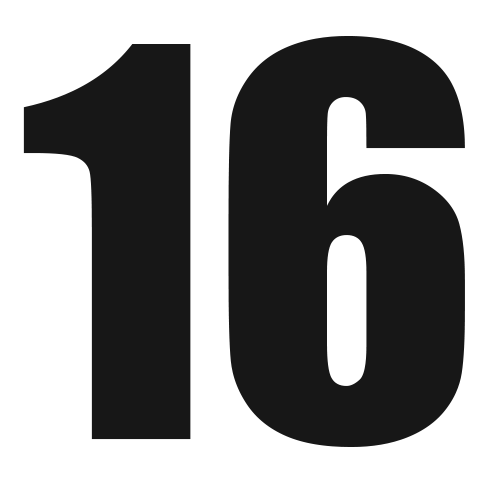
<style>
.page{position:relative;width:480px;height:480px;background:#171717}
.page>*{position:absolute;margin:0}
.t1{font:500px "Impact";color:#171717}
</style>
<div class="page">
<p class="t1" style="left:23px;top:36px;width:442px;height:411px">16</p>
</div>
